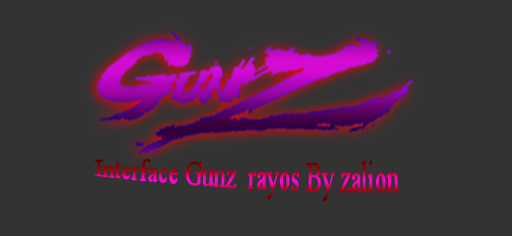
<style>
.page{position:relative;width:512px;height:236px;background:#333333}
.page>*{position:absolute;margin:0}
.t1{font:23.8px "TimesNewRomanPSMT"}
</style>
<div class="page">
<p class="t1" style="left:95px;top:159px;width:304px;height:43px">Interface Gunz  rayos By zalion</p>
</div>
